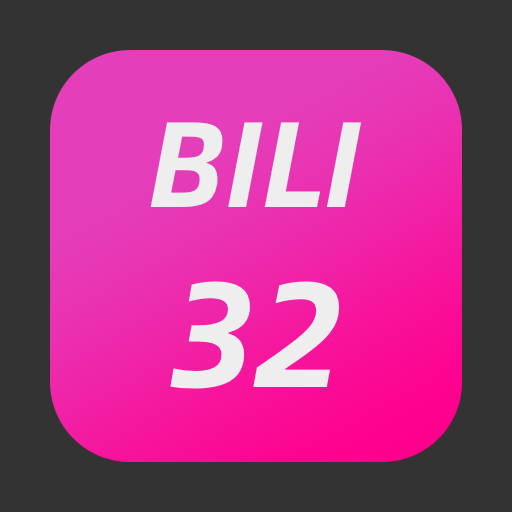
<style>
.page{position:relative;width:512px;height:512px;background:#333333}
.page>*{position:absolute;margin:0}
.t1{font:122px "AlibabaSans-BoldItalic";color:#eeeeee}
.t2{font:150px "AlibabaSans-BoldItalic";color:#eeeeee}
</style>
<div class="page">
<p class="t1" style="left:150px;top:122px;width:212px;height:267px;text-align:center">BILI<br><span class="t2">32</span></p>
</div>
